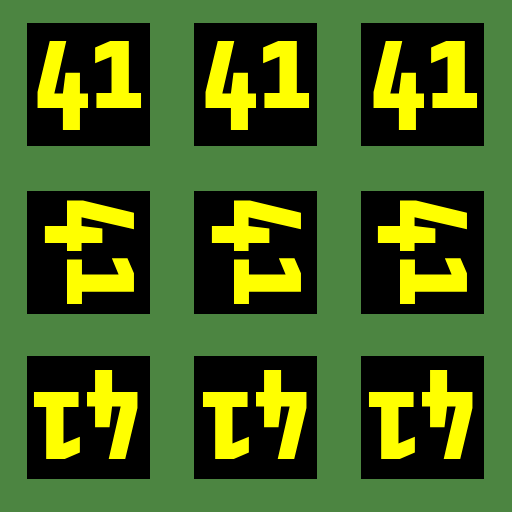
<style>
.page{position:relative;width:512px;height:512px;background:#4c8541}
.page>*{position:absolute;margin:0}
.t1{font:130px "Share-BoldOSF";color:#ffff00}
</style>
<div class="page">
<p class="t1" style="left:37px;top:41px;width:105px;height:90px">41</p>
<p class="t1" style="left:205px;top:41px;width:105px;height:90px">41</p>
<p class="t1" style="left:373px;top:41px;width:105px;height:90px">41</p>
<p class="t1" style="left:44px;top:200px;width:90px;height:105px;rotate:90deg">41</p>
<p class="t1" style="left:211px;top:200px;width:90px;height:105px;rotate:90deg">41</p>
<p class="t1" style="left:377px;top:200px;width:90px;height:105px;rotate:90deg">41</p>
<p class="t1" style="left:33px;top:369px;width:105px;height:90px;rotate:-180deg">41</p>
<p class="t1" style="left:202px;top:369px;width:105px;height:90px;rotate:-180deg">41</p>
<p class="t1" style="left:368px;top:369px;width:105px;height:90px;rotate:-180deg">41</p>
</div>
